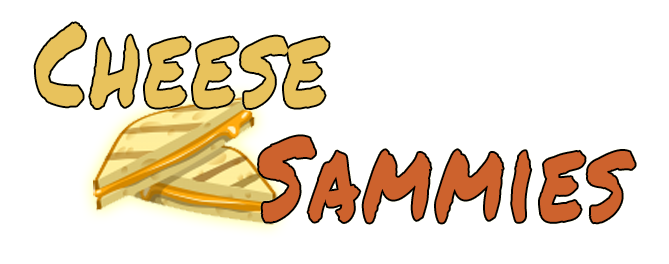
<style>
.page{position:relative;width:669px;height:264px;background:#ffffff}
.page>*{position:absolute;margin:0}
.t1{font:114.9px/114.2px "PermanentMarker";letter-spacing:0.06em;color:#cd622d;scale:0.72 1}
.t2{font:114.9px/114.2px "PermanentMarker";letter-spacing:0.06em;color:#e8c25c;scale:0.72 1}
</style>
<div class="page">
<p class="t1" style="left:35px;top:23px;width:600px;height:200px"><span class="t2">Cheese       <br>    </span>Sammies</p>
</div>
